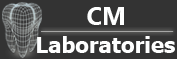
<style>
.page{position:relative;width:177px;height:59px;background:#333333}
.page>*{position:absolute;margin:0}
.t1{font:24.8px "Gadugi-Bold";color:#feffff}
.t2{font:22.1px "Tahoma-Bold";color:#feffff}
</style>
<div class="page">
<p class="t1" style="left:87px;top:7px;width:37px;height:18px">CM</p>
<p class="t2" style="left:37px;top:36px;width:138px;height:17px">Laboratories</p>
</div>
